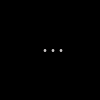
<style>
.page{position:relative;width:100px;height:100px;background:#000000}
.page>*{position:absolute;margin:0}
.t1{font:24px "Gulim";color:#c7c3c3}
</style>
<div class="page">
<p class="t1" style="left:41px;top:30px;width:24px;height:25px">...</p>
</div>
